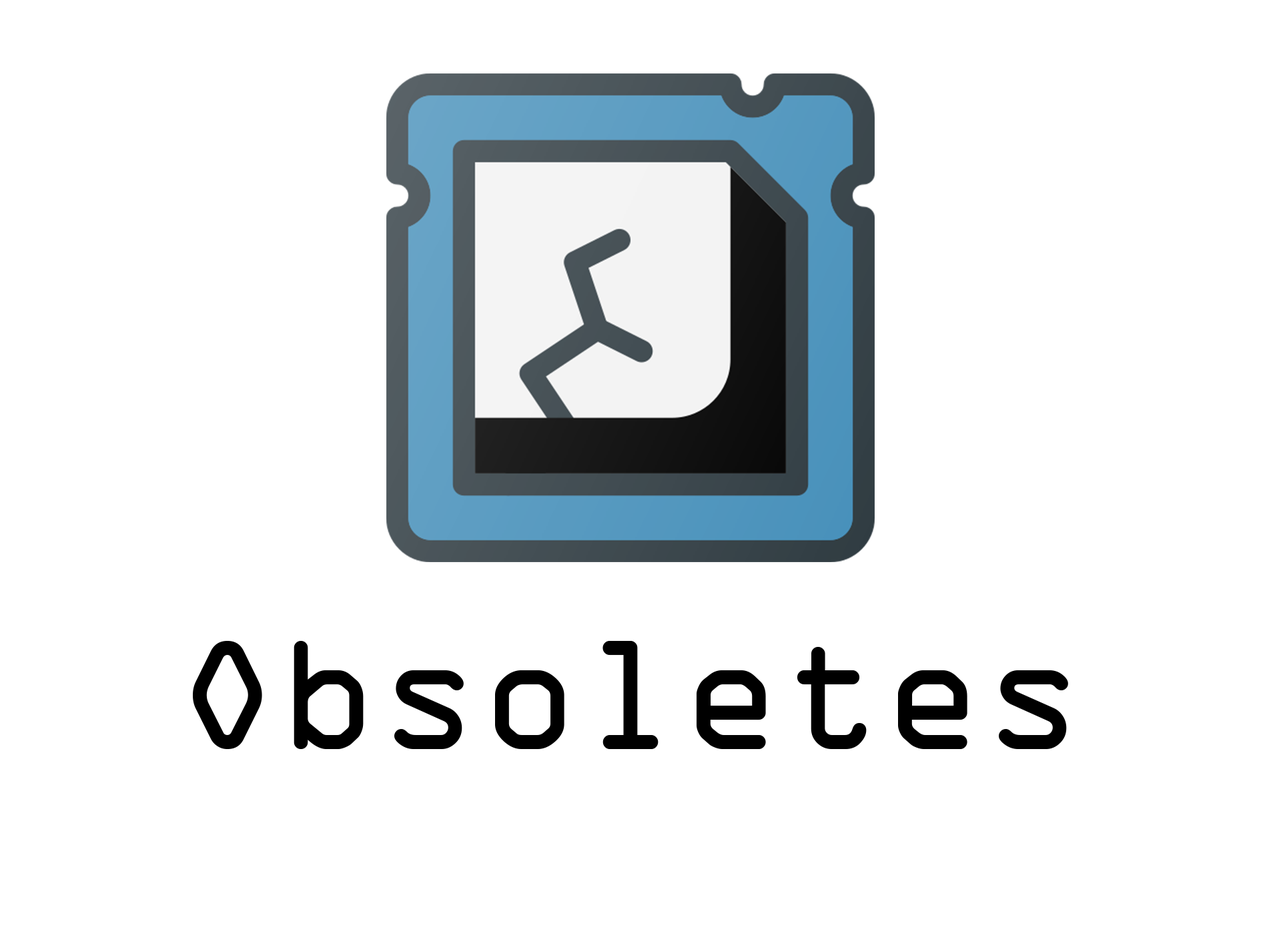
<style>
.page{position:relative;width:1261px;height:946px;background:#ffffff}
.page>*{position:absolute;margin:0}
.t1{font:166.8px "OCRAExtended";color:#000000}
</style>
<div class="page">
<p class="t1" style="left:193px;top:641px;width:875px;height:108px">Obsoletes</p>
</div>
